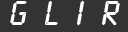
<style>
.page{position:relative;width:128px;height:32px;background:#333333}
.page>*{position:absolute;margin:0}
.t1{font:36px "LcdD";letter-spacing:0.5em;color:#ffffff}
</style>
<div class="page">
<p class="t1" style="left:10px;top:0px;width:110px;height:26px">GLIR</p>
</div>
